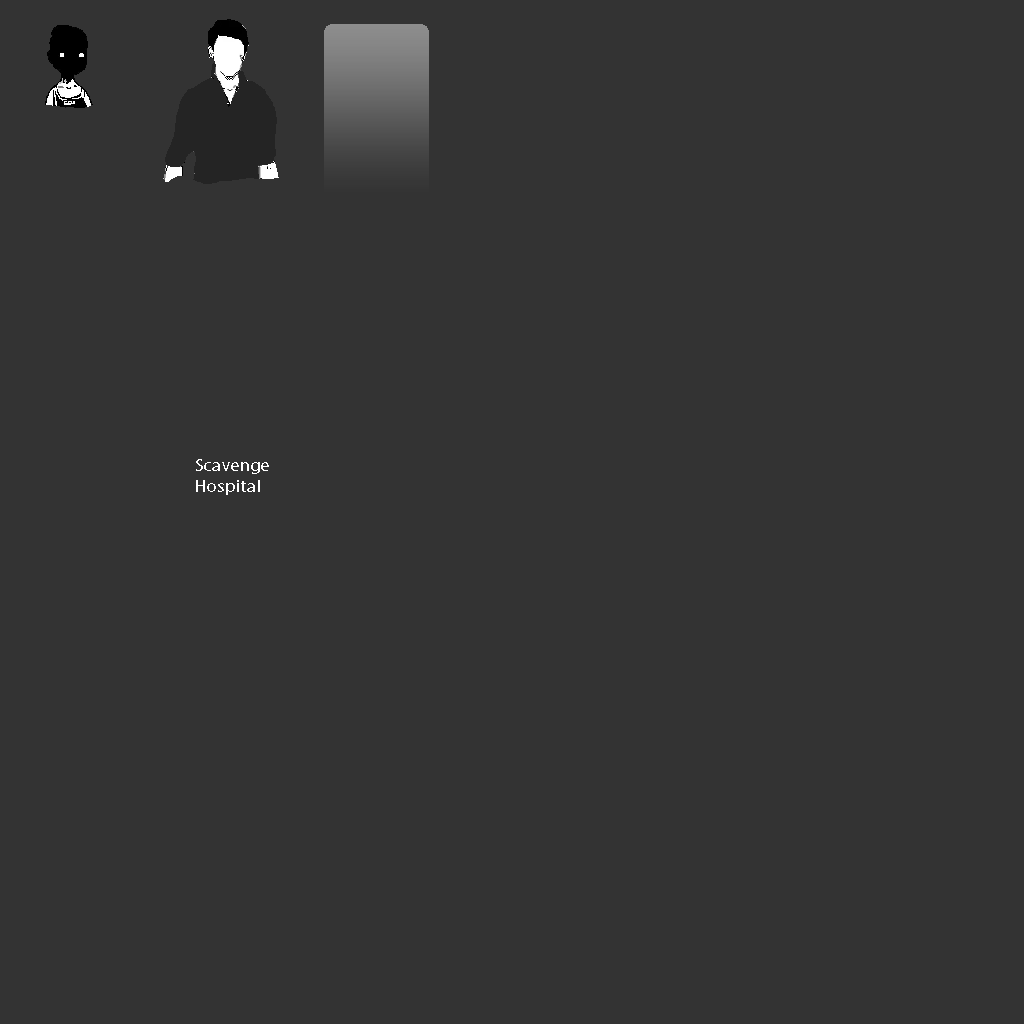
<style>
.page{position:relative;width:1024px;height:1024px;background:#333333}
.page>*{position:absolute;margin:0}
.t1{font:17px "MyriadPro-Regular";letter-spacing:0.04em;color:#ffffff;scale:1.04 1}
</style>
<div class="page">
<p class="t1" style="left:196px;top:459px;width:73px;height:36px">Scavenge<br>Hospital</p>
</div>
